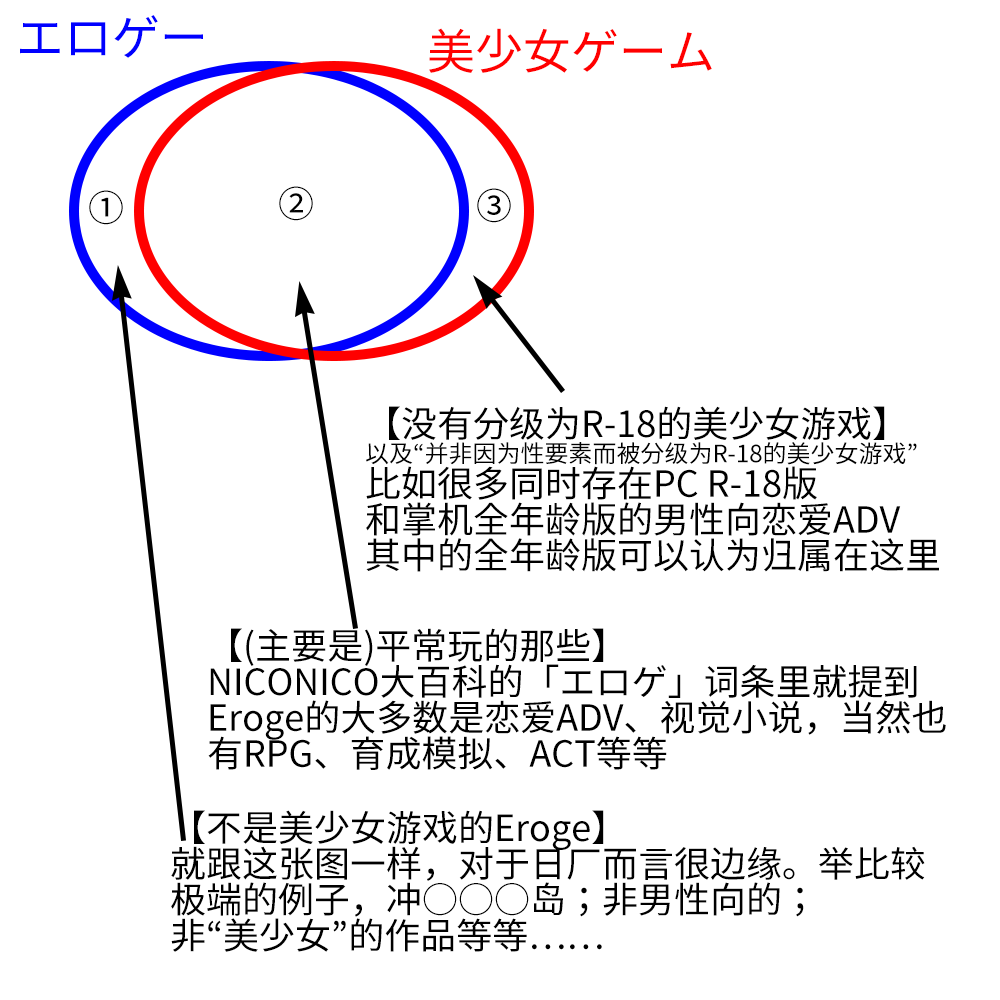
<style>
.page{position:relative;width:1000px;height:1000px;background:#ffffff}
.page>*{position:absolute;margin:0}
.t1{font:48px "SourceHanSans-Regular";color:#0000ff}
.t2{font:48px "SourceHanSans-Regular";color:#ff0000}
.t3{font:36px "SourceHanSans-Regular";color:#000000}
.t4{font:36px/36px "SourceHanSans-Regular";color:#000000}
.t5{font:24px/24px "SourceHanSans-Regular";color:#000000}
</style>
<div class="page">
<p class="t1" style="left:20px;top:15px;width:183px;height:43px">エロゲー</p>
<p class="t2" style="left:429px;top:28px;width:283px;height:45px">美少女ゲーム</p>
<p class="t3" style="left:89px;top:190px;width:34px;height:35px">①</p>
<p class="t3" style="left:279px;top:186px;width:34px;height:35px">②</p>
<p class="t3" style="left:477px;top:188px;width:34px;height:35px">③</p>
<p class="t4" style="left:366px;top:406px;width:573px;height:166px">【没有分级为R-18的美少女游戏】<br><span class="t5">以及“并非因为性要素而被分级为R-18的美少女游戏”<br></span>比如很多同时存在PC R-18版<br>和掌机全年龄版的男性向恋爱ADV<br>其中的全年龄版可以认为归属在这里</p>
<p class="t4" style="left:208px;top:628px;width:738px;height:142px">【(主要是)平常玩的那些】<br>NICONICO大百科的「エロゲ」词条里就提到<br>Eroge的大多数是恋爱ADV、视觉小说，当然也<br>有RPG、育成模拟、ACT等等</p>
<p class="t4" style="left:171px;top:810px;width:754px;height:142px">【不是美少女游戏的Eroge】<br>就跟这张图一样，对于日厂而言很边缘。举比较<br>极端的例子，冲○○○岛；非男性向的；<br>非“美少女”的作品等等……</p>
</div>
